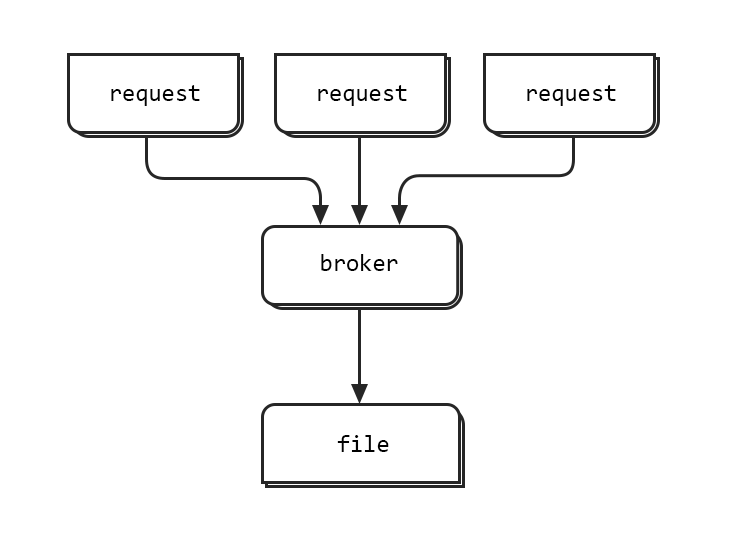
<style>
.page{position:relative;width:748px;height:536px;background:#ffffff}
.page>*{position:absolute;margin:0}
.t1{font:24px "Consolas";color:#010101}
</style>
<div class="page">
<p class="t1" style="left:111px;top:85px;width:89px;height:21px">request</p>
<p class="t1" style="left:318px;top:85px;width:89px;height:21px">request</p>
<p class="t1" style="left:527px;top:85px;width:89px;height:21px">request</p>
<p class="t1" style="left:321px;top:254px;width:77px;height:17px">broker</p>
<p class="t1" style="left:337px;top:435px;width:52px;height:17px">file</p>
</div>
